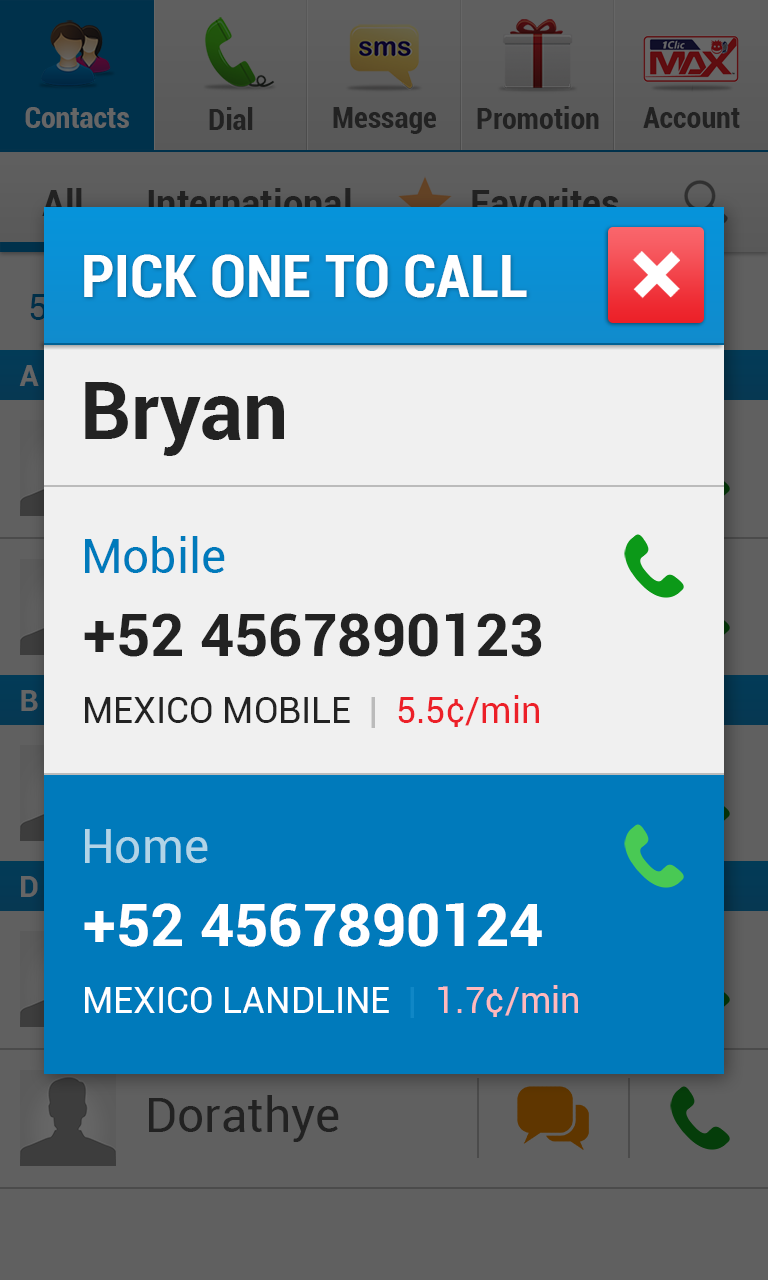
<style>
.page{position:relative;width:768px;height:1280px;background:#f0f0f0}
.page>*{position:absolute;margin:0}
.t1{font:60px "Roboto-BoldCondensed";color:#ffffff}
.t2{font:80px "Roboto-Bold";color:#222222}
.t3{font:48px "Roboto-Regular";color:#007abb}
.t4{font:60px "Roboto-Bold";color:#222222}
.t5{font:36px "Roboto-Regular";color:#222222}
.t6{font:36px "Roboto-Regular";color:#bbbbbb}
.t7{font:36px "Roboto-Regular";color:#ec2028}
.t8{font:48px "Roboto-Regular";color:#b1d4e7}
.t9{font:60px "Roboto-Bold";color:#ffffff}
.t10{font:36px "Roboto-Regular";color:#ffffff}
.t11{font:36px "Roboto-Regular";color:#1087c6}
.t12{font:36px "Roboto-Regular";color:#ffb9bc}
</style>
<div class="page">
<p class="t1" style="left:84px;top:254px;width:443px;height:44px">PICK ONE TO CALL</p>
<p class="t2" style="left:85px;top:382px;width:199px;height:74px">Bryan</p>
<p class="t3" style="left:85px;top:536px;width:140px;height:37px">Mobile</p>
<p class="t4" style="left:84px;top:613px;width:458px;height:44px">+52 4567890123</p>
<p class="t5" style="left:85px;top:695px;width:454px;height:33px">MEXICO MOBILE<span class="t6">  |  </span><span class="t7">5.5¢/min</span></p>
<p class="t8" style="left:85px;top:829px;width:123px;height:34px">Home</p>
<p class="t9" style="left:84px;top:903px;width:458px;height:44px">+52 4567890124</p>
<p class="t10" style="left:85px;top:985px;width:493px;height:33px">MEXICO LANDLINE<span class="t11">  |  </span><span class="t12">1.7¢/min</span></p>
</div>
